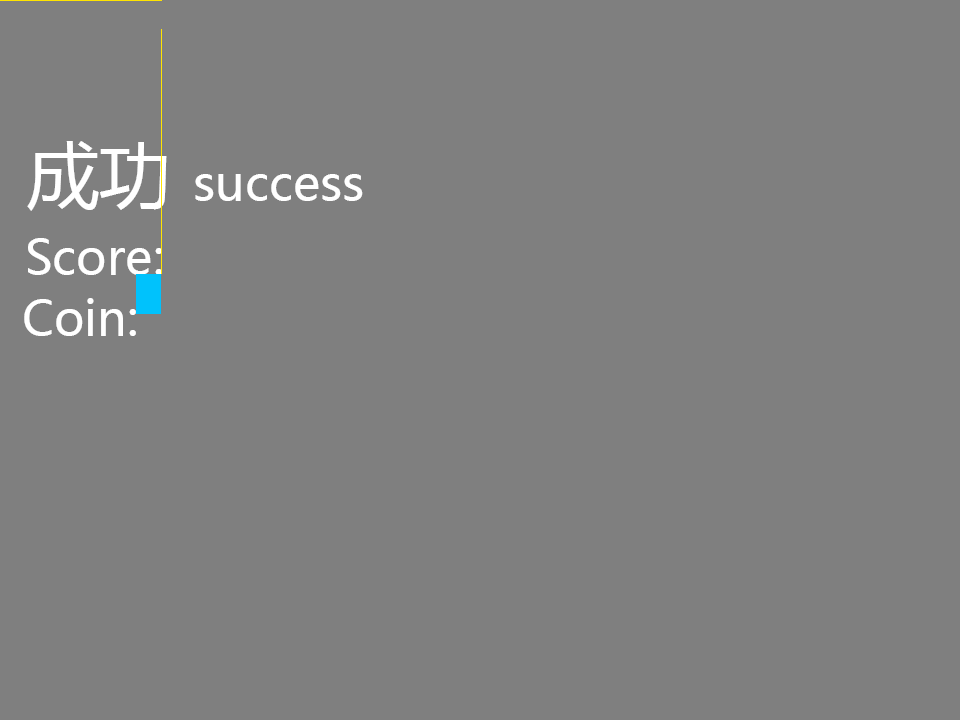
<style>
.page{position:relative;width:960px;height:720px;background:#7f7f7f}
.page>*{position:absolute;margin:0}
.t1{font:48px "MicrosoftYaHei";color:#ffffff}
.t2{font:72px "MicrosoftYaHei";color:#ffffff}
</style>
<div class="page">
<p class="t1" style="left:27px;top:141px;width:336px;height:70px"><span class="t2">成功 </span>success</p>
<p class="t1" style="left:28px;top:238px;width:134px;height:37px">Score:</p>
<p class="t1" style="left:24px;top:298px;width:112px;height:38px">Coin:</p>
</div>
